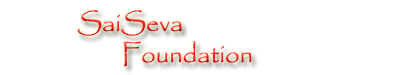
<style>
.page{position:relative;width:400px;height:75px;background:#ffffff}
.page>*{position:absolute;margin:0}
.t1{font:26px "Papyrus-Regular"}
</style>
<div class="page">
<p class="t1" style="left:77px;top:10px;width:175px;height:57px">SaiSeva <br>        Foundation</p>
</div>
